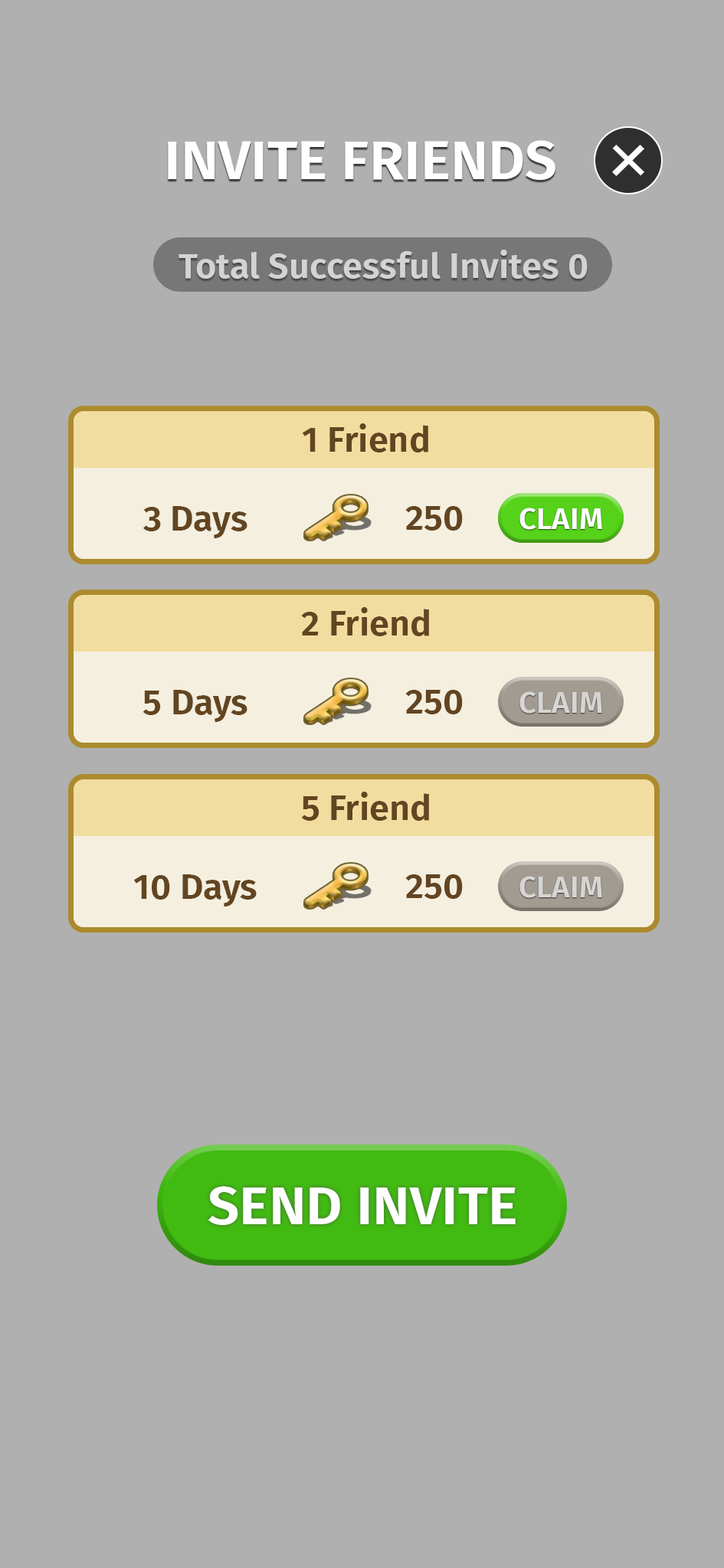
<style>
.page{position:relative;width:724px;height:1568px;background:#b0b0b0}
.page>*{position:absolute;margin:0}
.t1{font:53.8px "FiraSans-SemiBold";color:#ffffff;scale:1.05 1}
.t2{font:34.2px "FiraSans-SemiBold";color:#d3d3d3;scale:1.05 1}
.t3{font:34.2px "FiraSans-SemiBold";color:#624521;scale:1.05 1}
.t4{font:29.1px "FiraSans-SemiBold";color:#ffffff;scale:1.05 1}
.t5{font:29.1px "FiraSans-SemiBold";color:#d6d5d3;scale:1.05 1}
.t6{font:53.1px "FiraSans-SemiBold";color:#ffffff;scale:1.05 1}
</style>
<div class="page">
<p class="t1" style="left:168px;top:140px;width:387px;height:40px">INVITE FRIENDS</p>
<p class="t2" style="left:178px;top:250px;width:409px;height:29px">Total Successful Invites 0</p>
<p class="t3" style="left:302px;top:423px;width:126px;height:29px">1 Friend</p>
<p class="t3" style="left:143px;top:506px;width:104px;height:32px">3 Days</p>
<p class="t3" style="left:405px;top:506px;width:57px;height:25px">250</p>
<p class="t4" style="left:519px;top:508px;width:83px;height:22px">CLAIM</p>
<p class="t4" style="left:519px;top:508px;width:83px;height:22px">CLAIM</p>
<p class="t3" style="left:301px;top:607px;width:128px;height:29px">2 Friend</p>
<p class="t3" style="left:142px;top:690px;width:105px;height:32px">5 Days</p>
<p class="t3" style="left:405px;top:690px;width:57px;height:24px">250</p>
<p class="t5" style="left:519px;top:691px;width:83px;height:23px">CLAIM</p>
<p class="t3" style="left:301px;top:792px;width:128px;height:29px">5 Friend</p>
<p class="t3" style="left:133px;top:874px;width:123px;height:32px">10 Days</p>
<p class="t3" style="left:405px;top:874px;width:57px;height:25px">250</p>
<p class="t5" style="left:519px;top:876px;width:83px;height:22px">CLAIM</p>
<p class="t6" style="left:208px;top:1186px;width:307px;height:39px">SEND INVITE</p>
</div>
